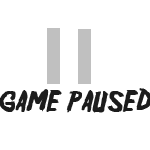
<style>
.page{position:relative;width:150px;height:150px;background:#ffffff}
.page>*{position:absolute;margin:0}
.t1{font:30px "Friday13";color:#1c1c1c}
</style>
<div class="page">
<p class="t1" style="left:0px;top:88px;width:152px;height:25px">game paused</p>
</div>
